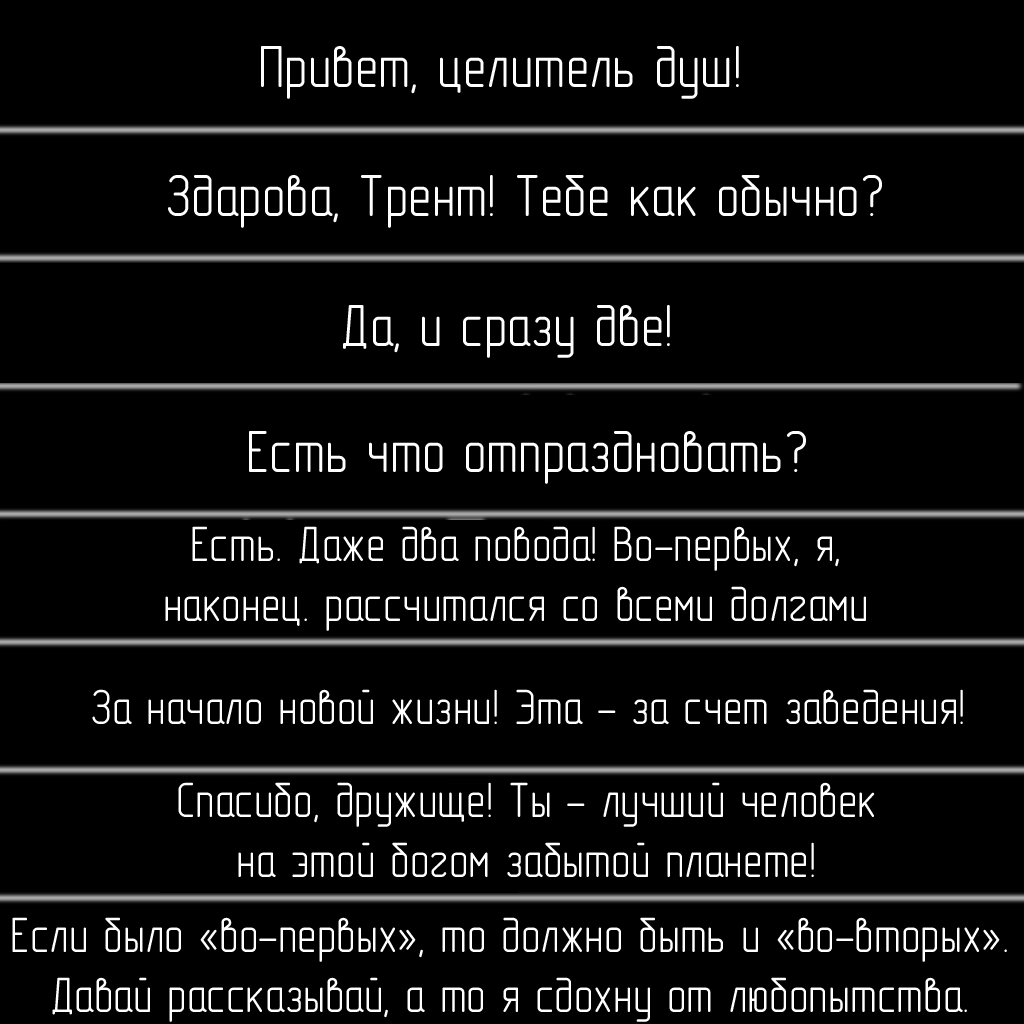
<style>
.page{position:relative;width:1024px;height:1024px;background:#000000}
.page>*{position:absolute;margin:0}
.t1{font:60px "GOST-2.304-81typeA";color:#ffffff}
.t2{font:50px "GOST-2.304-81typeA";color:#ffffff}
</style>
<div class="page">
<p class="t1" style="left:261px;top:46px;width:478px;height:53px">Привет, целитель душ!</p>
<p class="t1" style="left:168px;top:175px;width:714px;height:53px">Здарова, Трент! Тебе как обычно?</p>
<p class="t1" style="left:343px;top:305px;width:327px;height:53px">Да, и сразу две!</p>
<p class="t1" style="left:249px;top:431px;width:557px;height:53px">Есть что отпраздновать?</p>
<p class="t2" style="left:165px;top:526px;width:701px;height:105px;text-align:center">Есть. Даже два повода! Во-первых, я,<br>наконец. рассчитался со всеми долгами</p>
<p class="t2" style="left:92px;top:689px;width:871px;height:35px">За начало новой жизни! Эта - за счет заведения!</p>
<p class="t2" style="left:178px;top:782px;width:697px;height:95px;text-align:center">Спасибо, дружище! Ты - лучший человек<br>на этой богом забытой планете!</p>
<p class="t2" style="left:12px;top:917px;width:995px;height:105px;text-align:center">Если было «во-первых», то должно быть и «во-вторых».<br>Давай рассказывай, а то я сдохну от любопытства.</p>
</div>
